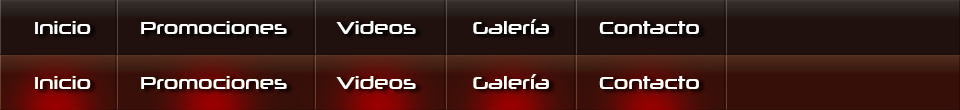
<style>
.page{position:relative;width:960px;height:110px;background:#20110e}
.page>*{position:absolute;margin:0}
.t1{font:17.8px "NeuropoliticalRg-Regular";color:#ffffff}
</style>
<div class="page">
<p class="t1" style="left:35px;top:19px;width:664px;height:15px">Inicio       Promociones       Videos        Galería       Contacto</p>
<p class="t1" style="left:35px;top:74px;width:664px;height:15px">Inicio       Promociones       Videos        Galería       Contacto</p>
</div>
